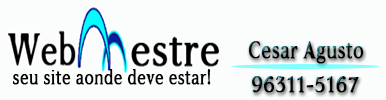
<style>
.page{position:relative;width:386px;height:100px;background:#fbfdfd}
.page>*{position:absolute;margin:0}
.t1{font:25px "WCADDENDUMBtalight";color:#030303;font-weight:bold;scale:0.76 1}
.t2{font:20.9px "WCADDENDUMBtalight";color:#030303;font-weight:bold;scale:0.79 1}
.t3{font:23.1px "WCADDENDUMBtalight";color:#030303;font-weight:bold;scale:0.94 1}
</style>
<div class="page">
<p class="t1" style="left:248px;top:41px;width:116px;height:23px">Cesar Agusto</p>
<p class="t2" style="left:12px;top:69px;width:199px;height:16px">seu site aonde deve estar!</p>
<p class="t3" style="left:252px;top:76px;width:107px;height:17px">96311-5167</p>
</div>
